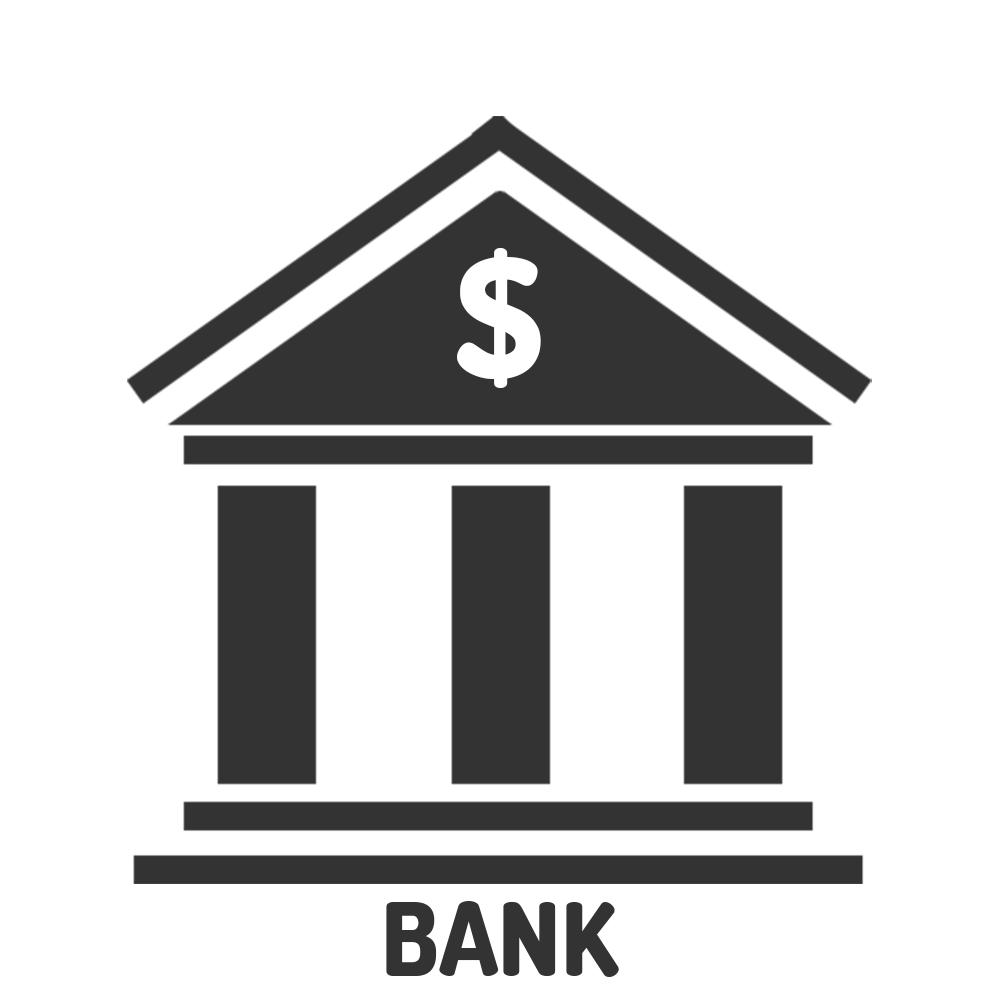
<style>
.page{position:relative;width:1000px;height:1000px;background:#ffffff}
.page>*{position:absolute;margin:0}
.t1{font:170.3px "Dosis-ExtraBold";color:#ffffff}
.t2{font:100.9px "Dosis-ExtraBold";color:#333333}
</style>
<div class="page">
<p class="t1" style="left:457px;top:248px;width:84px;height:140px">$</p>
<p class="t2" style="left:386px;top:901px;width:233px;height:76px">BANK</p>
</div>
